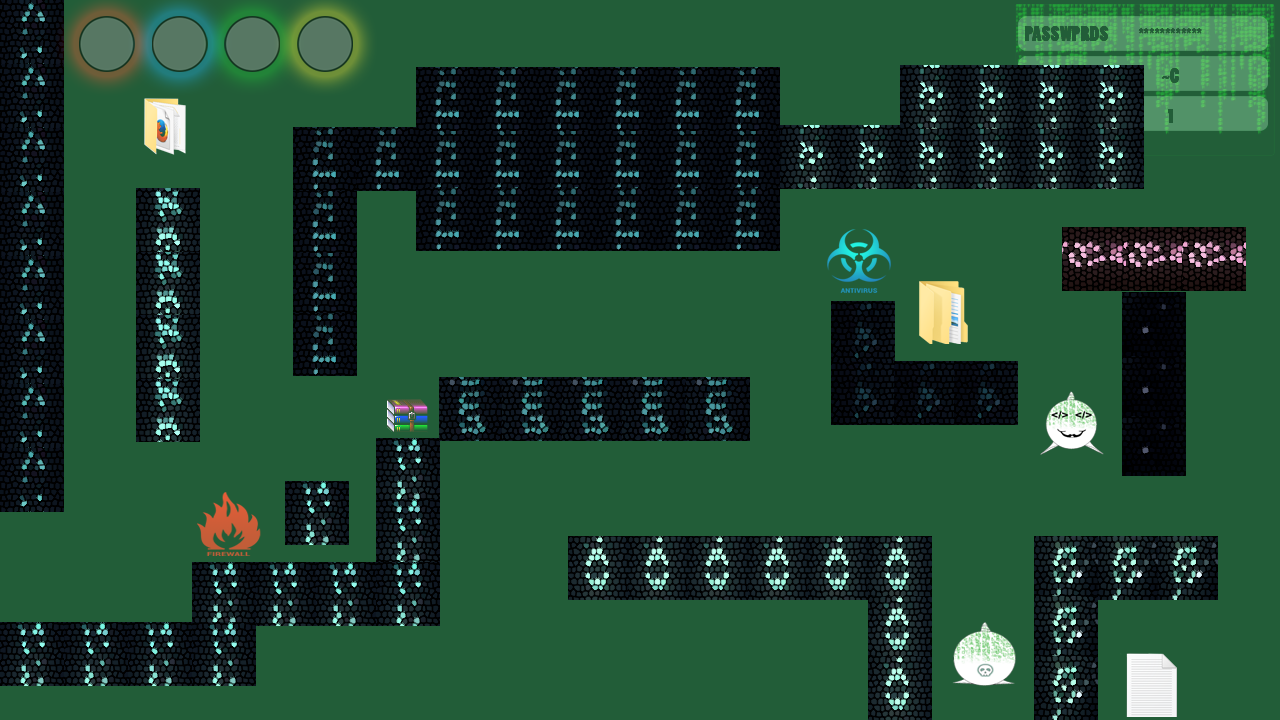
<style>
.page{position:relative;width:1280px;height:720px;background:#225d38}
.page>*{position:absolute;margin:0}
.t1{font:19.2px "PoplarStd";color:#225d38}
</style>
<div class="page">
<p class="t1" style="left:1025px;top:26px;width:84px;height:15px">PASSWPRDS</p>
<p class="t1" style="left:1138px;top:28px;width:64px;height:6px">************</p>
<p class="t1" style="left:1162px;top:68px;width:17px;height:15px">C~</p>
<p class="t1" style="left:1168px;top:109px;width:5px;height:14px">1</p>
</div>
